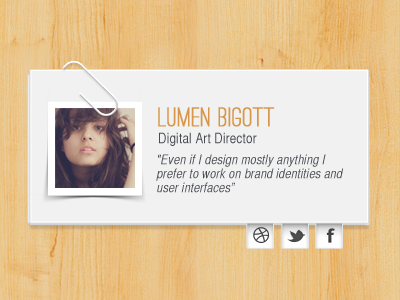
<style>
.page{position:relative;width:400px;height:300px;background:#f1f1f1}
.page>*{position:absolute;margin:0}
.t1{font:27.8px "OstrichSansRounded-Medium";color:#d89748;font-weight:bold}
.t2{font:14px/14px "HelveticaCYPlain";letter-spacing:0.02em;color:#494b52}
.t3{font:13px/14px "HelveticaCYOblique";letter-spacing:0.02em;color:#494b52}
</style>
<div class="page">
<p class="t1" style="left:158px;top:107px;width:117px;height:20px">Lumen Bigott</p>
<p class="t2" style="left:159px;top:132px;width:98px;height:14px">Digital Art Director<br><span class="t3">"</span></p>
<p class="t3" style="left:156px;top:154px;width:188px;height:39px">"Even if I design mostly anything I prefer to work on brand identities and user interfaces”<br><br>"</p>
</div>
